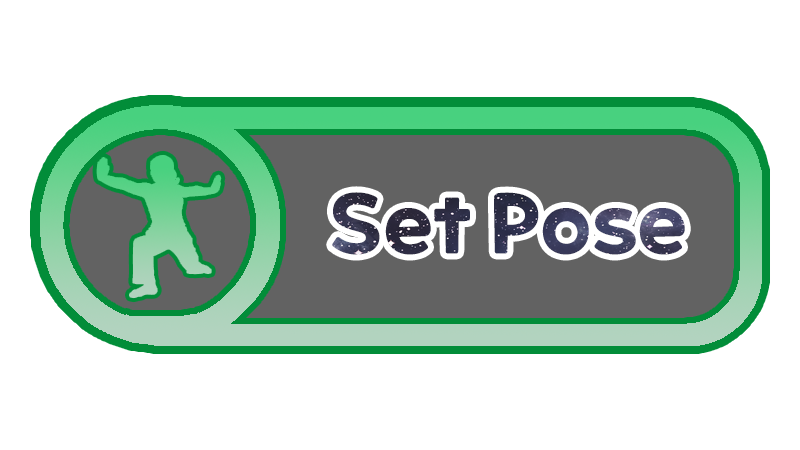
<style>
.page{position:relative;width:800px;height:450px;background:#ffffff}
.page>*{position:absolute;margin:0}
.t1{font:80px "ONEMobilePOPOTFRegular"}
</style>
<div class="page">
<p class="t1" style="left:332px;top:192px;width:353px;height:63px">Set Pose</p>
</div>
